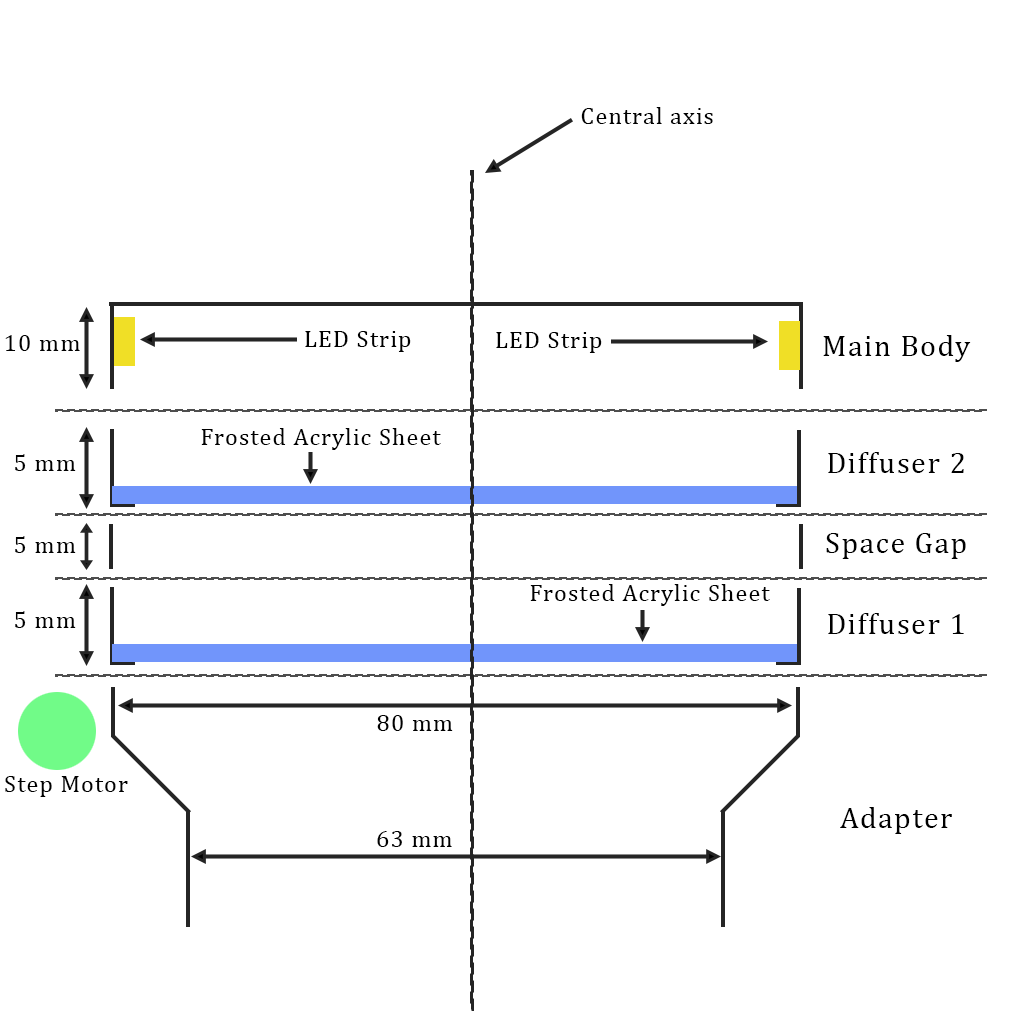
<style>
.page{position:relative;width:1024px;height:1024px;background:#ffffff}
.page>*{position:absolute;margin:0}
.t1{font:24px "Cambria";letter-spacing:0.05em;color:#000000}
.t2{font:30px "Cambria";letter-spacing:0.05em;color:#000000}
</style>
<div class="page">
<p class="t1" style="left:581px;top:107px;width:132px;height:17px">Central axis</p>
<p class="t1" style="left:5px;top:335px;width:75px;height:16px">10 mm</p>
<p class="t1" style="left:305px;top:331px;width:106px;height:21px">LED Strip</p>
<p class="t1" style="left:496px;top:332px;width:106px;height:21px">LED Strip</p>
<p class="t2" style="left:823px;top:335px;width:148px;height:27px">Main Body</p>
<p class="t1" style="left:201px;top:428px;width:240px;height:22px">Frosted Acrylic Sheet</p>
<p class="t1" style="left:15px;top:454px;width:61px;height:17px">5 mm</p>
<p class="t2" style="left:828px;top:452px;width:136px;height:21px">Diffuser 2</p>
<p class="t2" style="left:826px;top:533px;width:140px;height:26px">Space Gap</p>
<p class="t1" style="left:15px;top:536px;width:61px;height:17px">5 mm</p>
<p class="t1" style="left:530px;top:584px;width:240px;height:22px">Frosted Acrylic Sheet</p>
<p class="t1" style="left:15px;top:611px;width:61px;height:17px">5 mm</p>
<p class="t2" style="left:828px;top:613px;width:136px;height:21px">Diffuser 1</p>
<p class="t1" style="left:377px;top:715px;width:76px;height:16px">80 mm</p>
<p class="t1" style="left:5px;top:776px;width:123px;height:21px">Step Motor</p>
<p class="t2" style="left:840px;top:807px;width:112px;height:27px">Adapter</p>
<p class="t1" style="left:377px;top:831px;width:75px;height:16px">63 mm</p>
</div>
